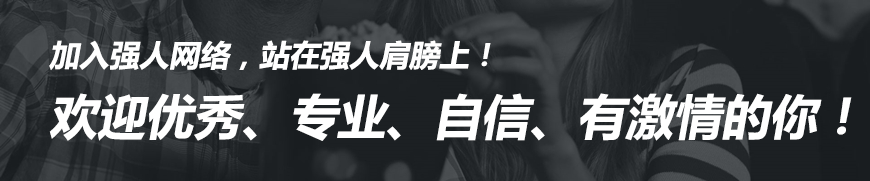
<style>
.page{position:relative;width:870px;height:181px}
.page>*{position:absolute;margin:0}
.t1{font:48px "MicrosoftYaHei-Bold";color:#ffffff;font-style:italic}
.t2{font:30px "MicrosoftYaHei-Bold";color:#ffffff;font-style:italic}
</style>
<div class="page">
<p class="t1" style="left:49px;top:40px;width:803px;height:101px"><span class="t2">加入强人网络，站在强人肩膀上！<br></span>欢迎优秀、专业、自信、有激情的你！</p>
</div>
